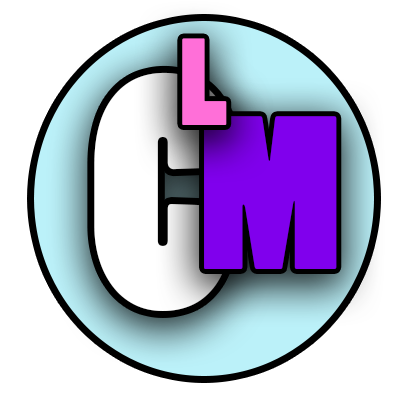
<style>
.page{position:relative;width:400px;height:400px;background:#ffffff}
.page>*{position:absolute;margin:0}
.t1{font:115.3px "Poplar";color:#ff6fd8}
.t2{font:315.2px "Poplar"}
.t3{font:203.6px "Poplar";color:#8000ed}
</style>
<div class="page">
<p class="t1" style="left:182px;top:38px;width:45px;height:87px">L</p>
<p class="t2" style="left:94px;top:72px;width:141px;height:239px">C</p>
<p class="t3" style="left:204px;top:116px;width:133px;height:153px">M</p>
</div>
